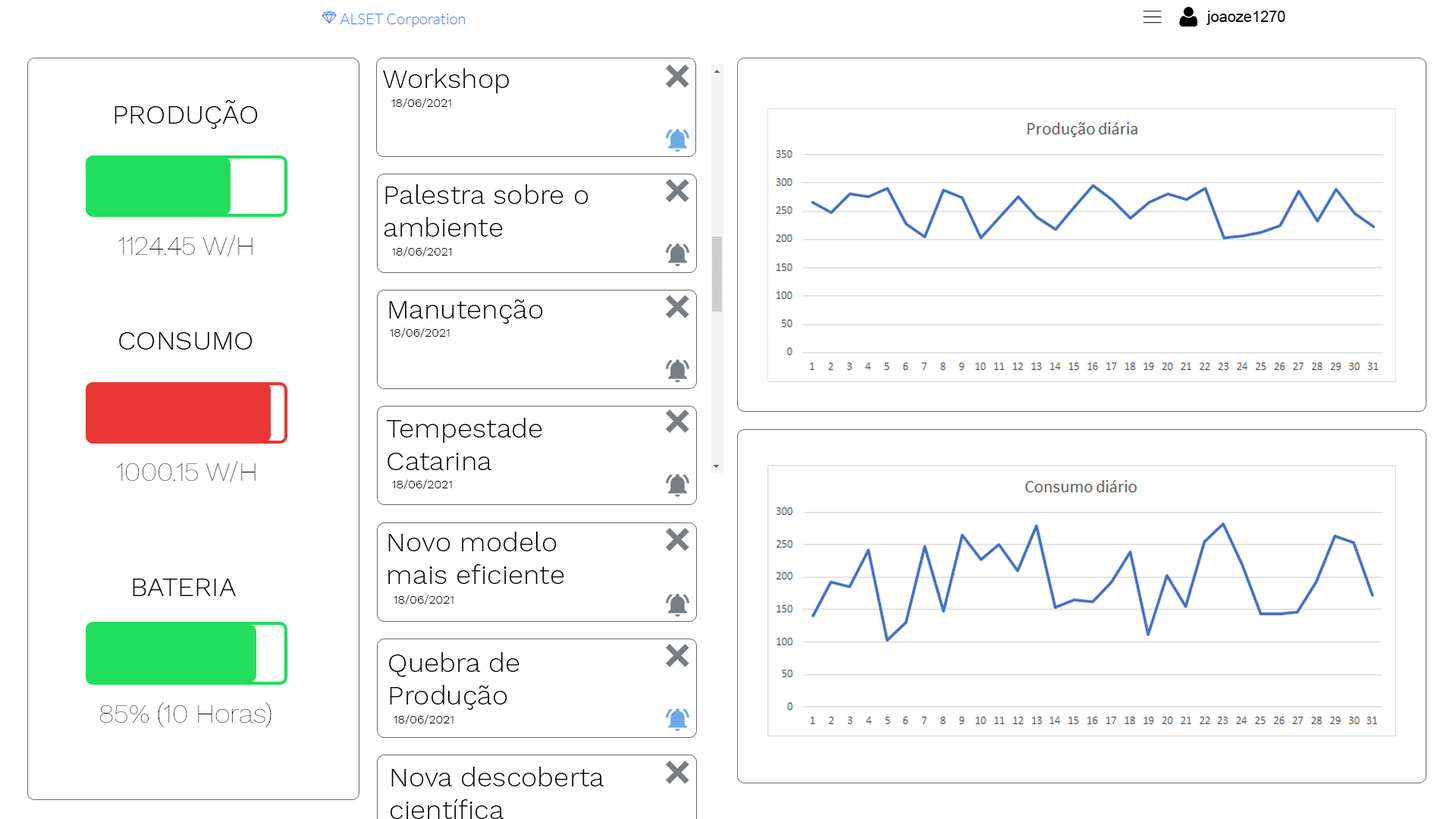
<style>
.page{position:relative;width:1456px;height:819px;background:#ffffff}
.page>*{position:absolute;margin:0}
.t1{font:27.3px "WorkSans-Light";color:#000000}
.t2{font:12.1px "WorkSans-Light";color:#000000}
.t3{font:27.3px "WorkSans-Thin";color:#000000}
</style>
<div class="page">
<p class="t1" style="left:383px;top:68px;width:126px;height:25px">Workshop</p>
<p class="t1" style="left:115px;top:100px;width:143px;height:29px">PRODUÇÃO</p>
<p class="t2" style="left:391px;top:98px;width:60px;height:10px">18/06/2021</p>
<p class="t1" style="left:384px;top:184px;width:204px;height:53px">Palestra sobre o<br>ambiente</p>
<p class="t3" style="left:118px;top:235px;width:135px;height:21px">1124.45 W/H</p>
<p class="t2" style="left:391px;top:246px;width:61px;height:10px">18/06/2021</p>
<p class="t1" style="left:389px;top:300px;width:154px;height:24px">Manutenção</p>
<p class="t2" style="left:389px;top:328px;width:61px;height:9px">18/06/2021</p>
<p class="t1" style="left:119px;top:332px;width:134px;height:18px">CONSUMO</p>
<p class="t1" style="left:386px;top:418px;width:156px;height:52px">Tempestade <br>Catarina</p>
<p class="t3" style="left:116px;top:461px;width:140px;height:21px">1000.15 W/H</p>
<p class="t2" style="left:392px;top:479px;width:60px;height:10px">18/06/2021</p>
<p class="t1" style="left:388px;top:532px;width:176px;height:52px">Novo modelo<br>mais eficiente</p>
<p class="t1" style="left:133px;top:579px;width:103px;height:17px">BATERIA</p>
<p class="t2" style="left:394px;top:595px;width:59px;height:9px">18/06/2021</p>
<p class="t1" style="left:389px;top:652px;width:130px;height:58px">Quebra de <br>Produção</p>
<p class="t3" style="left:99px;top:702px;width:172px;height:26px">85% (10 Horas)</p>
<p class="t2" style="left:394px;top:714px;width:59px;height:10px">18/06/2021</p>
<p class="t1" style="left:391px;top:767px;width:213px;height:52px">Nova descoberta<br>científica</p>
</div>
